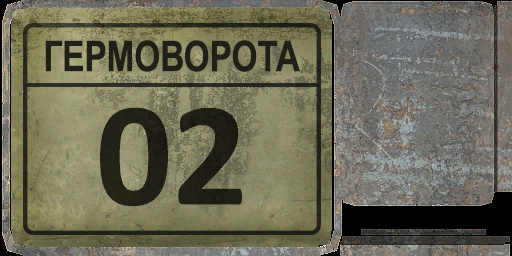
<style>
.page{position:relative;width:512px;height:256px}
.page>*{position:absolute;margin:0}
.t1{font:42.2px "Arial-BoldMT";color:#202018;scale:0.79 1}
</style>
<div class="page">
<p class="t1" style="left:45px;top:40px;width:255px;height:32px">ГЕРМОВОРОТА</p>
</div>
